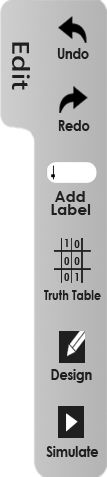
<style>
.page{position:relative;width:107px;height:477px;background:#ffffff}
.page>*{position:absolute;margin:0}
.t1{font:22.3px "MicrosoftJhengHeiBold";color:#1f1f1f;scale:1.22 1}
.t2{font:15.4px "CenturyGothic-Bold";color:#1f1f1f;scale:0.82 1}
.t3{font:15.3px "CenturyGothic-Bold";color:#1f1f1f}
.t4{font:10.8px "CenturyGothic-Bold";color:#1f1f1f;scale:0.82 1}
.t5{font:13.5px "CenturyGothic-Bold";color:#1f1f1f;scale:0.82 1}
</style>
<div class="page">
<p class="t1" style="left:12px;top:42px;width:18px;height:48px;rotate:90deg">Edit</p>
<p class="t2" style="left:57px;top:48px;width:32px;height:11px">Undo</p>
<p class="t2" style="left:58px;top:120px;width:32px;height:11px">Redo</p>
<p class="t3" style="left:55px;top:191px;width:30px;height:11px">Add</p>
<p class="t3" style="left:51px;top:204px;width:40px;height:11px">Label</p>
<p class="t4" style="left:65px;top:239px;width:3px;height:8px">1</p>
<p class="t4" style="left:74px;top:240px;width:6px;height:8px">0</p>
<p class="t4" style="left:64px;top:257px;width:6px;height:8px">0</p>
<p class="t4" style="left:74px;top:257px;width:6px;height:8px">0</p>
<p class="t4" style="left:64px;top:273px;width:6px;height:8px">0</p>
<p class="t4" style="left:75px;top:273px;width:3px;height:8px">1</p>
<p class="t5" style="left:44px;top:290px;width:57px;height:10px">Truth Table</p>
<p class="t2" style="left:51px;top:369px;width:41px;height:14px">Design</p>
<p class="t2" style="left:46px;top:446px;width:53px;height:11px">Simulate</p>
</div>
